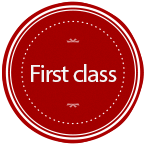
<style>
.page{position:relative;width:146px;height:145px;background:#ffffff}
.page>*{position:absolute;margin:0}
.t1{font:25px "MyriadPro-Regular";letter-spacing:-0.04em;color:#f5f5f5}
</style>
<div class="page">
<p class="t1" style="left:31px;top:64px;width:86px;height:18px">First class</p>
</div>
